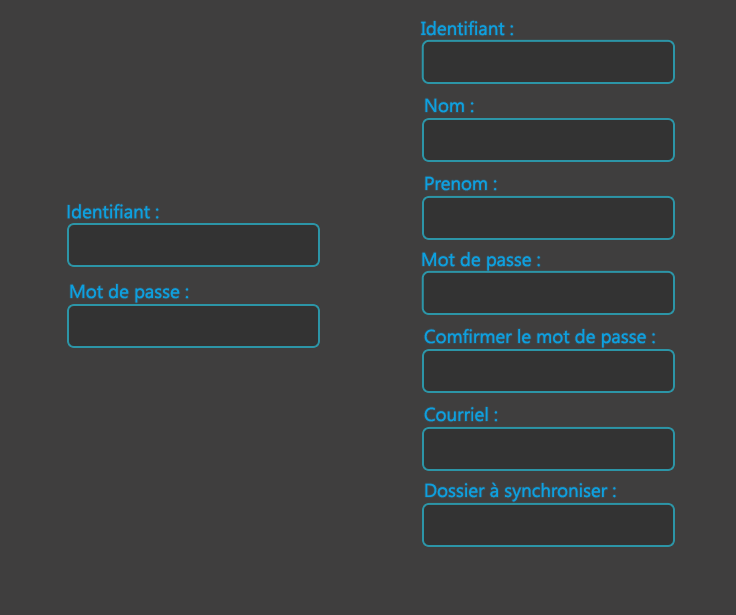
<style>
.page{position:relative;width:736px;height:615px;background:#3f3e3e}
.page>*{position:absolute;margin:0}
.t1{font:18.7px "SegoeUI";color:#0ba1e0}
</style>
<div class="page">
<p class="t1" style="left:425px;top:98px;width:49px;height:15px">Nom :</p>
<p class="t1" style="left:425px;top:176px;width:72px;height:15px">Prenom :</p>
<p class="t1" style="left:67px;top:204px;width:92px;height:15px">Identifiant :</p>
<p class="t1" style="left:422px;top:252px;width:118px;height:19px">Mot de passe :</p>
<p class="t1" style="left:70px;top:284px;width:119px;height:19px">Mot de passe :</p>
<p class="t1" style="left:424px;top:328px;width:231px;height:20px">Comfirmer le mot de passe :</p>
<p class="t1" style="left:424px;top:407px;width:73px;height:15px">Courriel :</p>
<p class="t1" style="left:425px;top:482px;width:191px;height:20px">Dossier à synchroniser :</p>
</div>
